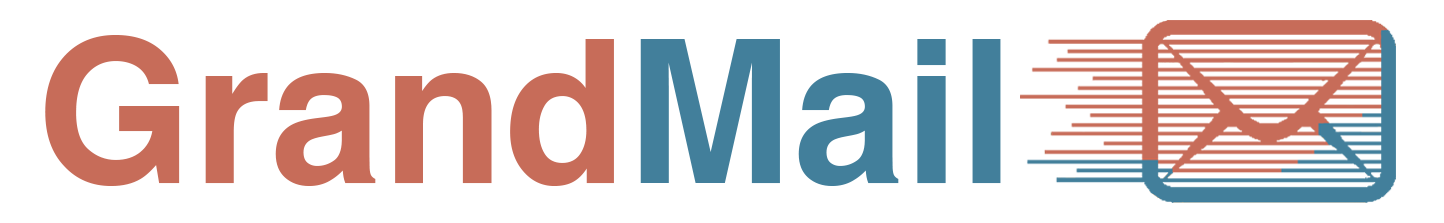
<style>
.page{position:relative;width:1444px;height:223px;background:#ffffff}
.page>*{position:absolute;margin:0}
.t1{font:200px "Helvetica-Bold";color:#c76c59}
.t2{font:200px "Helvetica-Bold";color:#427f9b}
</style>
<div class="page">
<p class="t1" style="left:45px;top:35px;width:956px;height:151px">Grand<span class="t2">Mail</span></p>
</div>
